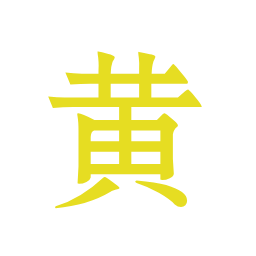
<style>
.page{position:relative;width:256px;height:256px;background:#ffffff}
.page>*{position:absolute;margin:0}
.t1{font:160px "Reeji-CloudSongHei-GB-Regular";color:#e6dd22}
</style>
<div class="page">
<p class="t1" style="left:48px;top:50px;width:155px;height:159px">黄</p>
</div>
